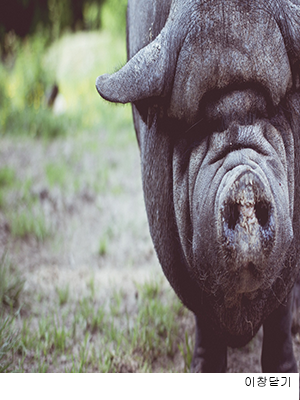
<style>
.page{position:relative;width:300px;height:400px}
.page>*{position:absolute;margin:0}
.t1{font:12px "Gulim";color:#000000}
</style>
<div class="page">
<p class="t1" style="left:245px;top:376px;width:45px;height:11px">이창닫기</p>
</div>
